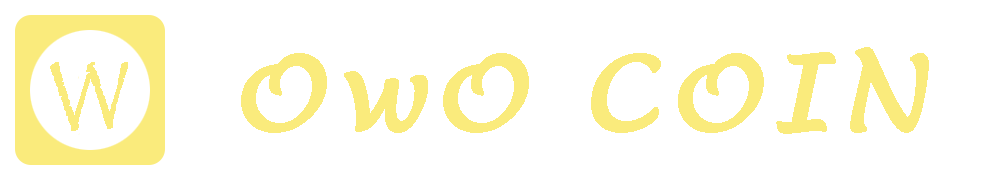
<style>
.page{position:relative;width:1000px;height:180px;background:#ffffff}
.page>*{position:absolute;margin:0}
.t1{font:100px "LucidaHandwriting-Italic";letter-spacing:0.075em;color:#faeb7c;font-weight:bold;scale:1.06 1}
.t2{font:72px "Papyrus-Regular";letter-spacing:0.075em;color:#faeb7c;font-weight:bold;scale:1.06 1}
</style>
<div class="page">
<p class="t1" style="left:241px;top:47px;width:688px;height:87px">OwO COIN</p>
<p class="t2" style="left:50px;top:62px;width:78px;height:69px">W</p>
</div>
